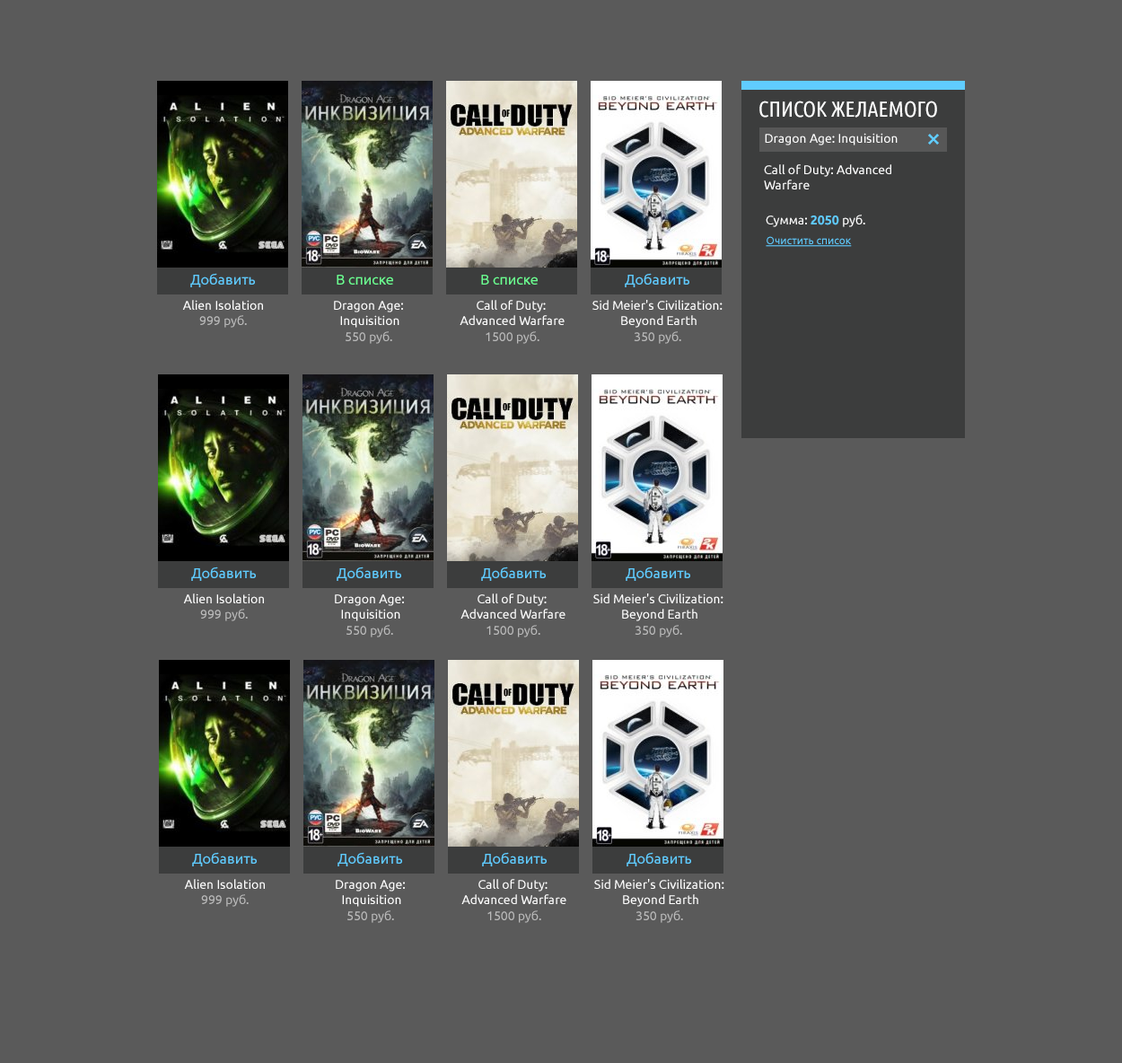
<style>
.page{position:relative;width:1122px;height:1063px;background:#5a5a5a}
.page>*{position:absolute;margin:0}
.t1{font:21.5px "UbuntuCondensed-Regular";color:#ffffff;text-transform:uppercase}
.t2{font:12.6px "Ubuntu";color:#ffffff}
.t3{font:12.6px "Ubuntu-Bold";color:#60ccff}
.t4{font:10.8px "Ubuntu";color:#60ccff;text-decoration:underline}
.t5{font:14.4px "Ubuntu";color:#60ccff}
.t6{font:14.4px "Ubuntu";color:#6cfe91}
.t7{font:12.6px "Ubuntu";color:#bababa}
</style>
<div class="page">
<p class="t1" style="left:759px;top:101px;width:178px;height:17px">Список желаемого</p>
<p class="t2" style="left:765px;top:133px;width:133px;height:12px">Dragon Age: Inquisition</p>
<p class="t2" style="left:764px;top:164px;width:127px;height:25px">Call of Duty: Advanced <br>Warfare</p>
<p class="t2" style="left:766px;top:215px;width:99px;height:12px">Сумма: <span class="t3">2050 </span>руб.</p>
<p class="t4" style="left:766px;top:236px;width:86px;height:11px">Очистить список</p>
<p class="t5" style="left:190px;top:273px;width:65px;height:14px">Добавить</p>
<p class="t6" style="left:337px;top:275px;width:56px;height:10px">В списке</p>
<p class="t6" style="left:481px;top:275px;width:57px;height:10px">В списке</p>
<p class="t5" style="left:625px;top:273px;width:64px;height:14px">Добавить</p>
<p class="t2" style="left:182px;top:300px;width:81px;height:10px">Alien Isolation</p>
<p class="t2" style="left:334px;top:301px;width:69px;height:27px;text-align:center">Dragon Age: <br>Inquisition</p>
<p class="t2" style="left:460px;top:300px;width:105px;height:25px;text-align:center">Call of Duty: <br>Advanced Warfare</p>
<p class="t2" style="left:592px;top:300px;width:131px;height:28px;text-align:center">Sid Meier's Civilization: <br>Beyond Earth</p>
<p class="t7" style="left:199px;top:315px;width:48px;height:13px">999 руб.</p>
<p class="t7" style="left:346px;top:331px;width:46px;height:13px">550 руб.</p>
<p class="t7" style="left:486px;top:331px;width:53px;height:13px">1500 руб.</p>
<p class="t7" style="left:634px;top:331px;width:47px;height:13px">350 руб.</p>
<p class="t5" style="left:191px;top:566px;width:65px;height:15px">Добавить</p>
<p class="t5" style="left:337px;top:566px;width:64px;height:15px">Добавить</p>
<p class="t5" style="left:481px;top:566px;width:65px;height:15px">Добавить</p>
<p class="t5" style="left:626px;top:566px;width:64px;height:15px">Добавить</p>
<p class="t2" style="left:183px;top:593px;width:81px;height:10px">Alien Isolation</p>
<p class="t2" style="left:460px;top:593px;width:105px;height:25px;text-align:center">Call of Duty: <br>Advanced Warfare</p>
<p class="t2" style="left:593px;top:593px;width:130px;height:28px;text-align:center">Sid Meier's Civilization: <br>Beyond Earth</p>
<p class="t2" style="left:335px;top:594px;width:69px;height:27px;text-align:center">Dragon Age: <br>Inquisition</p>
<p class="t7" style="left:200px;top:609px;width:48px;height:12px">999 руб.</p>
<p class="t7" style="left:346px;top:625px;width:47px;height:12px">550 руб.</p>
<p class="t7" style="left:487px;top:625px;width:53px;height:12px">1500 руб.</p>
<p class="t7" style="left:635px;top:625px;width:47px;height:12px">350 руб.</p>
<p class="t5" style="left:192px;top:852px;width:65px;height:14px">Добавить</p>
<p class="t5" style="left:338px;top:852px;width:64px;height:14px">Добавить</p>
<p class="t5" style="left:482px;top:852px;width:65px;height:14px">Добавить</p>
<p class="t5" style="left:627px;top:852px;width:64px;height:14px">Добавить</p>
<p class="t2" style="left:184px;top:879px;width:81px;height:10px">Alien Isolation</p>
<p class="t2" style="left:336px;top:880px;width:69px;height:27px;text-align:center">Dragon Age: <br>Inquisition</p>
<p class="t2" style="left:461px;top:879px;width:105px;height:25px;text-align:center">Call of Duty: <br>Advanced Warfare</p>
<p class="t2" style="left:594px;top:879px;width:130px;height:28px;text-align:center">Sid Meier's Civilization: <br>Beyond Earth</p>
<p class="t7" style="left:201px;top:894px;width:48px;height:13px">999 руб.</p>
<p class="t7" style="left:347px;top:910px;width:47px;height:13px">550 руб.</p>
<p class="t7" style="left:487px;top:910px;width:54px;height:13px">1500 руб.</p>
<p class="t7" style="left:636px;top:910px;width:47px;height:13px">350 руб.</p>
</div>
